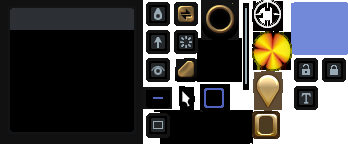
<style>
.page{position:relative;width:348px;height:144px;background:#000000}
.page>*{position:absolute;margin:0}
.t1{font:12px "H2mjsM";letter-spacing:-0.05em;color:#99aab5;font-weight:bold}
</style>
<div class="page">
<p class="t1" style="left:301px;top:93px;width:10px;height:11px">T</p>
</div>
